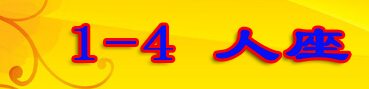
<style>
.page{position:relative;width:369px;height:89px}
.page>*{position:absolute;margin:0}
.t1{font:49.7px "LiSu";letter-spacing:0.04em;color:#0510f5;font-weight:bold;scale:1.31 1}
</style>
<div class="page">
<p class="t1" style="left:74px;top:25px;width:275px;height:36px">1-4 人座</p>
</div>
